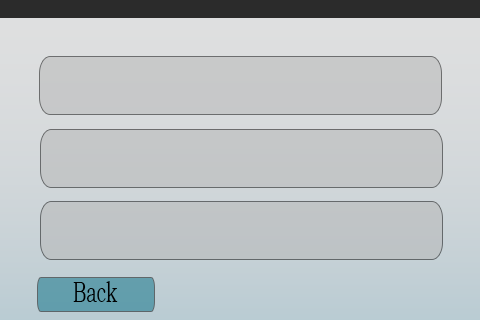
<style>
.page{position:relative;width:480px;height:320px}
.page>*{position:absolute;margin:0}
.t1{font:29.5px "BookmanOldStyle";color:#000000;scale:0.61 1}
</style>
<div class="page">
<p class="t1" style="left:73px;top:281px;width:45px;height:21px">Back</p>
</div>
